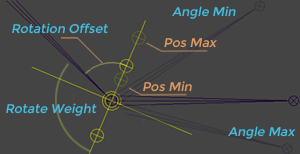
<style>
.page{position:relative;width:300px;height:154px;background:#444444}
.page>*{position:absolute;margin:0}
.t1{font:12.4px "Montserrat-Regular";color:#44bee1;font-style:italic}
.t2{font:12.4px "Montserrat-Regular";color:#e19b62;font-style:italic}
</style>
<div class="page">
<p class="t1" style="left:172px;top:6px;width:64px;height:13px">Angle Min</p>
<p class="t1" style="left:12px;top:23px;width:96px;height:11px">Rotation Offset</p>
<p class="t2" style="left:164px;top:38px;width:53px;height:10px">Pos Max</p>
<p class="t2" style="left:143px;top:81px;width:49px;height:11px">Pos Min</p>
<p class="t1" style="left:6px;top:103px;width:91px;height:13px">Rotate Weight</p>
<p class="t1" style="left:228px;top:126px;width:68px;height:13px">Angle Max</p>
</div>
